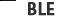
<style>
.page{position:relative;width:59px;height:16px;background:#ffffff}
.page>*{position:absolute;margin:0}
.t1{font:16px "AdobeGothicStd-Bold";color:#303030;font-weight:bold}
</style>
<div class="page">
<p class="t1" style="left:28px;top:2px;width:27px;height:14px">BLE</p>
</div>
